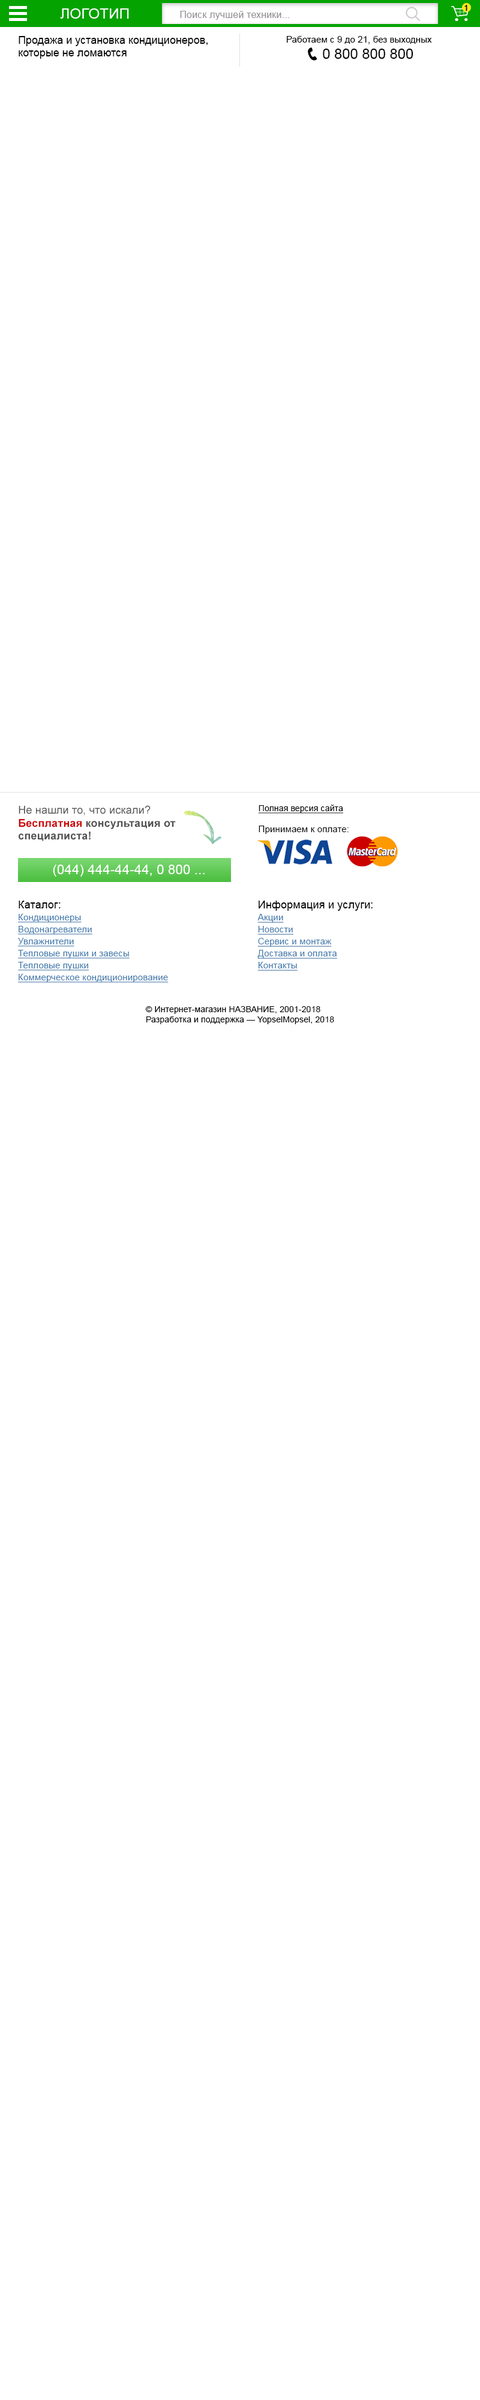
<style>
.page{position:relative;width:480px;height:2400px;background:#ffffff}
.page>*{position:absolute;margin:0}
.t1{font:8.4px "HelveticaNeue-Medium";letter-spacing:0.01em;color:#000000}
.t2{font:14.4px "ArialMT";letter-spacing:0.01em;color:#ffffff}
.t3{font:9.6px "ArialMT";letter-spacing:0.01em;color:#909090}
.t4{font:10.8px "ArialMT";color:#000000}
.t5{font:9px "ArialMT";letter-spacing:0.01em;color:#000000}
.t6{font:14.4px "ArialMT";color:#000000}
.t7{font:10.8px "Arial-BoldMT";letter-spacing:0.01em;color:#4f4f4f}
.t8{font:10.8px "ArialMT";letter-spacing:0.01em;color:#4f4f4f}
.t9{font:10.8px "Arial-BoldMT";letter-spacing:0.01em;color:#cc0001}
.t10{font:8.4px "ArialMT";letter-spacing:0.01em;color:#000000;text-decoration:underline}
.t11{font:13.2px "ArialMT";letter-spacing:0.01em;color:#ffffff}
.t12{font:9px/12px "ArialMT";letter-spacing:0.01em;color:#3e77aa;text-decoration:underline}
.t13{font:10.8px/12px "ArialMT";letter-spacing:0.01em;color:#000000}
.t14{font:8.4px "ArialMT";letter-spacing:0.01em;color:#000000}
</style>
<div class="page">
<p class="t1" style="left:464px;top:5px;width:3px;height:6px">1</p>
<p class="t2" style="left:60px;top:8px;width:69px;height:11px">ЛОГОТИП</p>
<p class="t3" style="left:180px;top:11px;width:109px;height:9px">Поиск лучшей техники...</p>
<p class="t4" style="left:19px;top:36px;width:189px;height:23px">Продажа и установка кондиционеров,<br>которые не ломаются</p>
<p class="t5" style="left:287px;top:36px;width:145px;height:8px">Работаем с 9 до 21, без выходных</p>
<p class="t6" style="left:323px;top:49px;width:90px;height:10px">0 800 800 800</p>
<p class="t7" style="left:19px;top:805px;width:157px;height:36px"><span class="t8">Не нашли то, что искали?<br></span><span class="t9">Бесплатная</span> консультация от<br>специалиста!</p>
<p class="t10" style="left:258px;top:805px;width:85px;height:9px">Полная версия сайта</p>
<p class="t5" style="left:259px;top:826px;width:90px;height:8px">Принимаем к оплате:</p>
<p class="t11" style="left:53px;top:865px;width:152px;height:12px">(044) 444-44-44, 0 800 ...</p>
<p class="t12" style="left:18px;top:901px;width:151px;height:82px"><span class="t13">Каталог:<br></span>Кондиционеры<br>Водонагреватели<br>Увлажнители<br>Тепловые пушки и завесы<br>Тепловые пушки<br>Коммерческое кондиционирование</p>
<p class="t12" style="left:257px;top:901px;width:116px;height:70px"><span class="t13">Информация и услуги:<br></span>Акции<br>Новости<br>Сервис и монтаж<br>Доставка и оплата<br>Контакты</p>
<p class="t14" style="left:145px;top:1006px;width:189px;height:18px">© Интернет-магазин НАЗВАНИЕ, 2001-2018<br>Разработка и поддержка — YopselMopsel, 2018</p>
</div>
